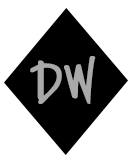
<style>
.page{position:relative;width:132px;height:161px;background:#ffffff}
.page>*{position:absolute;margin:0}
.t1{font:68.3px "CoveredByYourGrace";color:#a9a9a9}
</style>
<div class="page">
<p class="t1" style="left:30px;top:56px;width:66px;height:48px">DW</p>
</div>
